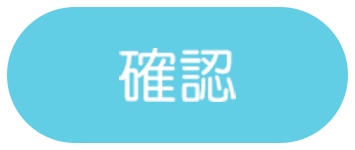
<style>
.page{position:relative;width:355px;height:150px;background:#61cee5}
.page>*{position:absolute;margin:0}
.t1{font:59.5px "DFYuan-Md-HK-BF";color:#ffffff}
</style>
<div class="page">
<p class="t1" style="left:119px;top:48px;width:117px;height:54px">確認</p>
</div>
